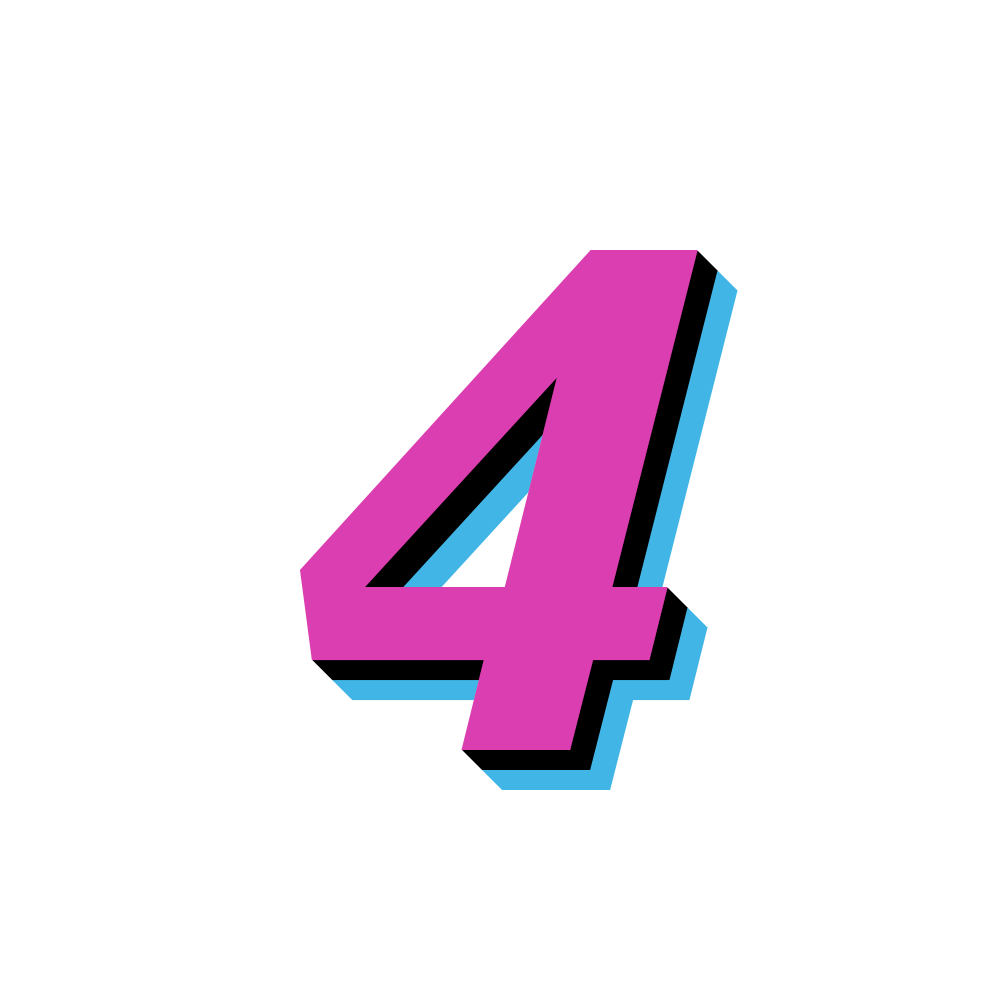
<style>
.page{position:relative;width:1000px;height:1000px;background:#ffffff}
.page>*{position:absolute;margin:0}
.t1{font:625px "NBAHeat";color:#db3eb1}
</style>
<div class="page">
<p class="t1" style="left:300px;top:250px;width:398px;height:500px">4</p>
</div>
